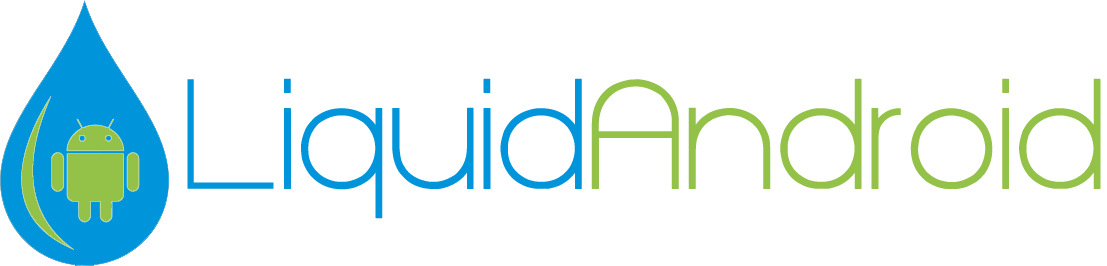
<style>
.page{position:relative;width:1107px;height:266px;background:#ffffff}
.page>*{position:absolute;margin:0}
.t1{font:130px "Steiner";color:#94c248;font-weight:bold}
.t2{font:130px "Steiner";color:#0094da;font-weight:bold}
</style>
<div class="page">
<p class="t1" style="left:187px;top:78px;width:914px;height:141px"><span class="t2">Liquid</span>Android</p>
</div>
